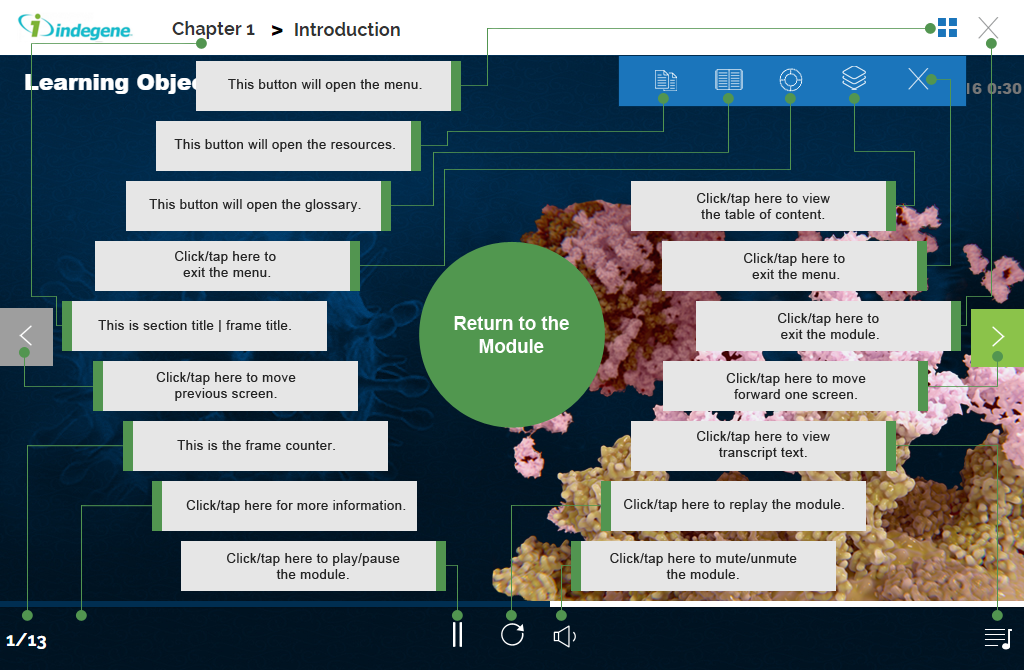
<style>
.page{position:relative;width:1024px;height:670px;background:#e6e6e6}
.page>*{position:absolute;margin:0}
.t1{font:13.3px "ArialMT";letter-spacing:0.025em;color:#252525}
.t2{font:18.7px "Arial-BoldMT";color:#fefefe}
</style>
<div class="page">
<p class="t1" style="left:228px;top:79px;width:194px;height:13px">This button will open the menu.</p>
<p class="t1" style="left:174px;top:139px;width:221px;height:13px">This button will open the resources.</p>
<p class="t1" style="left:697px;top:193px;width:133px;height:26px;text-align:center">Click/tap here to view<br>the table of content.</p>
<p class="t1" style="left:149px;top:199px;width:212px;height:13px">This button will open the glossary.</p>
<p class="t1" style="left:175px;top:251px;width:101px;height:26px;text-align:center">Click/tap here to <br>exit the menu.</p>
<p class="t1" style="left:744px;top:253px;width:101px;height:26px;text-align:center">Click/tap here to <br>exit the menu.</p>
<p class="t2" style="left:454px;top:316px;width:115px;height:37px;text-align:center">Return to the<br>Module</p>
<p class="t1" style="left:778px;top:313px;width:101px;height:26px;text-align:center">Click/tap here to <br>exit the module.</p>
<p class="t1" style="left:98px;top:320px;width:193px;height:12px">This is section title | frame title.</p>
<p class="t1" style="left:156px;top:372px;width:140px;height:29px;text-align:center">Click/tap here to move<br>previous screen.</p>
<p class="t1" style="left:726px;top:373px;width:140px;height:26px;text-align:center">Click/tap here to move<br>forward one screen.</p>
<p class="t1" style="left:697px;top:431px;width:133px;height:29px;text-align:center">Click/tap here to view<br>transcript text.</p>
<p class="t1" style="left:177px;top:440px;width:158px;height:10px">This is the frame counter.</p>
<p class="t1" style="left:186px;top:500px;width:220px;height:13px">Click/tap here for more information.</p>
<p class="t1" style="left:624px;top:499px;width:220px;height:13px">Click/tap here to replay the module.</p>
<p class="t1" style="left:227px;top:553px;width:173px;height:26px;text-align:center">Click/tap here to play/pause<br>the module.</p>
<p class="t1" style="left:610px;top:553px;width:187px;height:26px;text-align:center">Click/tap here to mute/unmute<br>the module.</p>
</div>
